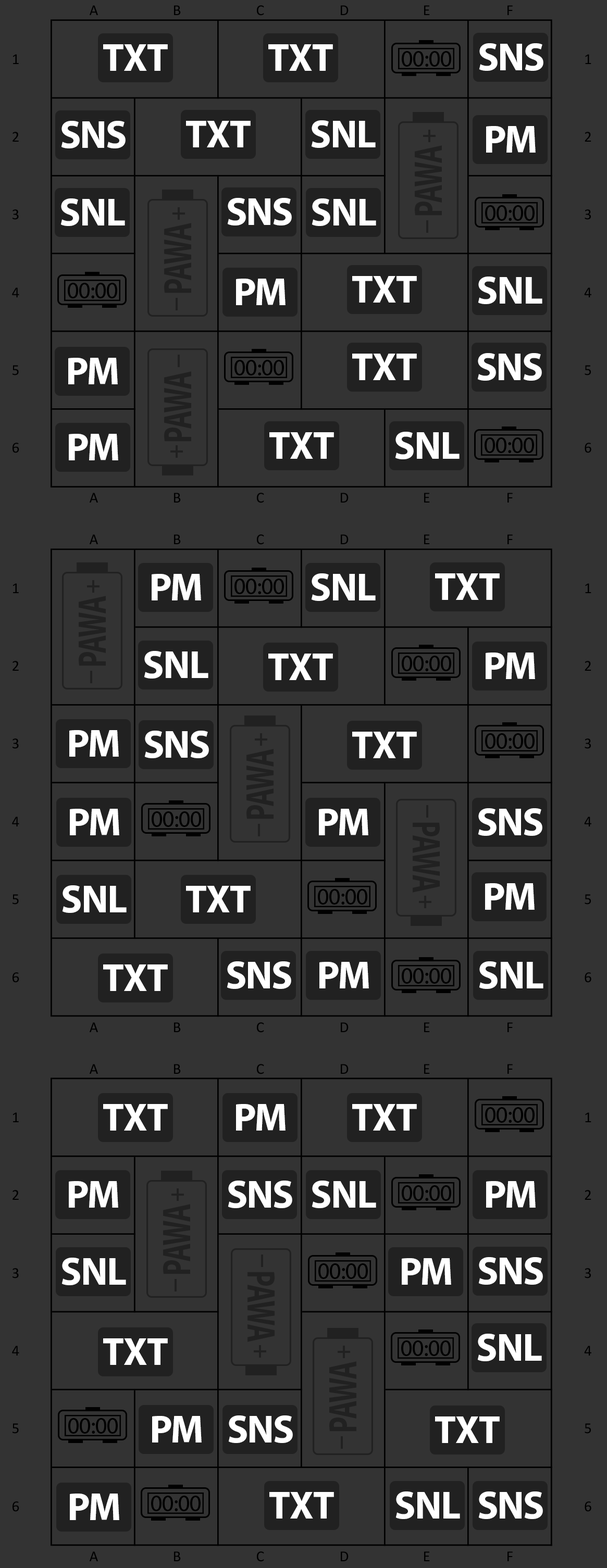
<style>
.page{position:relative;width:607px;height:1568px;background:#333333}
.page>*{position:absolute;margin:0}
.t1{font:39.1px "MyriadPro-Bold";letter-spacing:-0.025em;color:#ffffff}
.t2{font:23.8px "MyriadPro-Regular";letter-spacing:-0.025em;color:#000000}
.t3{font:39.9px "MyriadPro-Bold";letter-spacing:-0.025em;color:#212121;scale:0.71 1}
</style>
<div class="page">
<p class="t1" style="left:103px;top:44px;width:65px;height:27px">TXT</p>
<p class="t1" style="left:268px;top:44px;width:65px;height:27px">TXT</p>
<p class="t2" style="left:402px;top:51px;width:49px;height:16px">00:00</p>
<p class="t1" style="left:479px;top:43px;width:64px;height:28px">SNS</p>
<p class="t1" style="left:61px;top:121px;width:65px;height:27px">SNS</p>
<p class="t1" style="left:186px;top:121px;width:64px;height:26px">TXT</p>
<p class="t1" style="left:311px;top:120px;width:64px;height:28px">SNL</p>
<p class="t1" style="left:486px;top:126px;width:49px;height:27px">PM</p>
<p class="t3" style="left:415px;top:145px;width:27px;height:71px;rotate:-90deg">PAWA</p>
<p class="t1" style="left:227px;top:198px;width:65px;height:27px">SNS</p>
<p class="t1" style="left:60px;top:198px;width:65px;height:28px">SNL</p>
<p class="t1" style="left:311px;top:198px;width:65px;height:28px">SNL</p>
<p class="t2" style="left:485px;top:205px;width:49px;height:16px">00:00</p>
<p class="t3" style="left:164px;top:223px;width:27px;height:70px;rotate:-90deg">PAWA</p>
<p class="t1" style="left:236px;top:279px;width:49px;height:26px">PM</p>
<p class="t1" style="left:352px;top:276px;width:65px;height:27px">TXT</p>
<p class="t1" style="left:478px;top:277px;width:64px;height:27px">SNL</p>
<p class="t2" style="left:68px;top:283px;width:49px;height:15px">00:00</p>
<p class="t1" style="left:352px;top:354px;width:65px;height:26px">TXT</p>
<p class="t1" style="left:477px;top:353px;width:65px;height:28px">SNS</p>
<p class="t1" style="left:68px;top:358px;width:50px;height:26px">PM</p>
<p class="t2" style="left:234px;top:360px;width:50px;height:15px">00:00</p>
<p class="t3" style="left:164px;top:371px;width:27px;height:71px;rotate:-90deg">PAWA</p>
<p class="t1" style="left:69px;top:434px;width:49px;height:26px">PM</p>
<p class="t1" style="left:269px;top:432px;width:65px;height:27px">TXT</p>
<p class="t1" style="left:395px;top:432px;width:64px;height:27px">SNL</p>
<p class="t2" style="left:484px;top:437px;width:50px;height:16px">00:00</p>
<p class="t1" style="left:152px;top:574px;width:49px;height:26px">PM</p>
<p class="t2" style="left:234px;top:579px;width:50px;height:15px">00:00</p>
<p class="t1" style="left:311px;top:573px;width:64px;height:28px">SNL</p>
<p class="t1" style="left:435px;top:573px;width:64px;height:27px">TXT</p>
<p class="t3" style="left:79px;top:596px;width:27px;height:70px;rotate:-90deg">PAWA</p>
<p class="t1" style="left:144px;top:651px;width:64px;height:28px">SNL</p>
<p class="t1" style="left:268px;top:654px;width:65px;height:26px">TXT</p>
<p class="t1" style="left:485px;top:653px;width:50px;height:26px">PM</p>
<p class="t2" style="left:402px;top:656px;width:49px;height:15px">00:00</p>
<p class="t1" style="left:69px;top:730px;width:50px;height:27px">PM</p>
<p class="t1" style="left:144px;top:731px;width:65px;height:27px">SNS</p>
<p class="t1" style="left:352px;top:732px;width:65px;height:26px">TXT</p>
<p class="t2" style="left:485px;top:733px;width:49px;height:16px">00:00</p>
<p class="t3" style="left:246px;top:749px;width:27px;height:70px;rotate:-90deg">PAWA</p>
<p class="t1" style="left:70px;top:809px;width:49px;height:26px">PM</p>
<p class="t1" style="left:319px;top:809px;width:49px;height:26px">PM</p>
<p class="t1" style="left:478px;top:808px;width:64px;height:28px">SNS</p>
<p class="t2" style="left:152px;top:811px;width:49px;height:16px">00:00</p>
<p class="t3" style="left:412px;top:822px;width:28px;height:71px;rotate:90deg">PAWA</p>
<p class="t1" style="left:62px;top:885px;width:65px;height:28px">SNL</p>
<p class="t1" style="left:186px;top:886px;width:64px;height:26px">TXT</p>
<p class="t2" style="left:318px;top:889px;width:49px;height:16px">00:00</p>
<p class="t1" style="left:485px;top:883px;width:49px;height:27px">PM</p>
<p class="t1" style="left:103px;top:964px;width:65px;height:27px">TXT</p>
<p class="t1" style="left:227px;top:961px;width:64px;height:28px">SNS</p>
<p class="t1" style="left:319px;top:962px;width:50px;height:26px">PM</p>
<p class="t1" style="left:479px;top:961px;width:64px;height:28px">SNL</p>
<p class="t2" style="left:402px;top:968px;width:49px;height:16px">00:00</p>
<p class="t1" style="left:103px;top:1104px;width:65px;height:27px">TXT</p>
<p class="t1" style="left:236px;top:1104px;width:49px;height:27px">PM</p>
<p class="t1" style="left:352px;top:1104px;width:65px;height:27px">TXT</p>
<p class="t2" style="left:485px;top:1107px;width:49px;height:16px">00:00</p>
<p class="t1" style="left:69px;top:1181px;width:49px;height:27px">PM</p>
<p class="t1" style="left:228px;top:1181px;width:64px;height:27px">SNS</p>
<p class="t1" style="left:311px;top:1181px;width:65px;height:27px">SNL</p>
<p class="t1" style="left:486px;top:1181px;width:49px;height:27px">PM</p>
<p class="t2" style="left:402px;top:1185px;width:49px;height:16px">00:00</p>
<p class="t3" style="left:163px;top:1204px;width:27px;height:70px;rotate:-90deg">PAWA</p>
<p class="t1" style="left:61px;top:1258px;width:65px;height:27px">SNL</p>
<p class="t2" style="left:318px;top:1263px;width:50px;height:16px">00:00</p>
<p class="t1" style="left:402px;top:1258px;width:49px;height:27px">PM</p>
<p class="t1" style="left:478px;top:1257px;width:65px;height:28px">SNS</p>
<p class="t3" style="left:247px;top:1272px;width:27px;height:70px;rotate:90deg">PAWA</p>
<p class="t1" style="left:477px;top:1334px;width:65px;height:27px">SNL</p>
<p class="t1" style="left:103px;top:1338px;width:65px;height:27px">TXT</p>
<p class="t2" style="left:401px;top:1340px;width:49px;height:16px">00:00</p>
<p class="t3" style="left:329px;top:1361px;width:27px;height:71px;rotate:-90deg">PAWA</p>
<p class="t2" style="left:68px;top:1418px;width:50px;height:16px">00:00</p>
<p class="t1" style="left:152px;top:1416px;width:50px;height:26px">PM</p>
<p class="t1" style="left:228px;top:1415px;width:65px;height:28px">SNS</p>
<p class="t1" style="left:435px;top:1416px;width:64px;height:27px">TXT</p>
<p class="t1" style="left:70px;top:1494px;width:49px;height:26px">PM</p>
<p class="t1" style="left:269px;top:1492px;width:65px;height:27px">TXT</p>
<p class="t1" style="left:395px;top:1491px;width:65px;height:28px">SNL</p>
<p class="t1" style="left:478px;top:1491px;width:65px;height:28px">SNS</p>
<p class="t2" style="left:151px;top:1496px;width:49px;height:15px">00:00</p>
</div>
